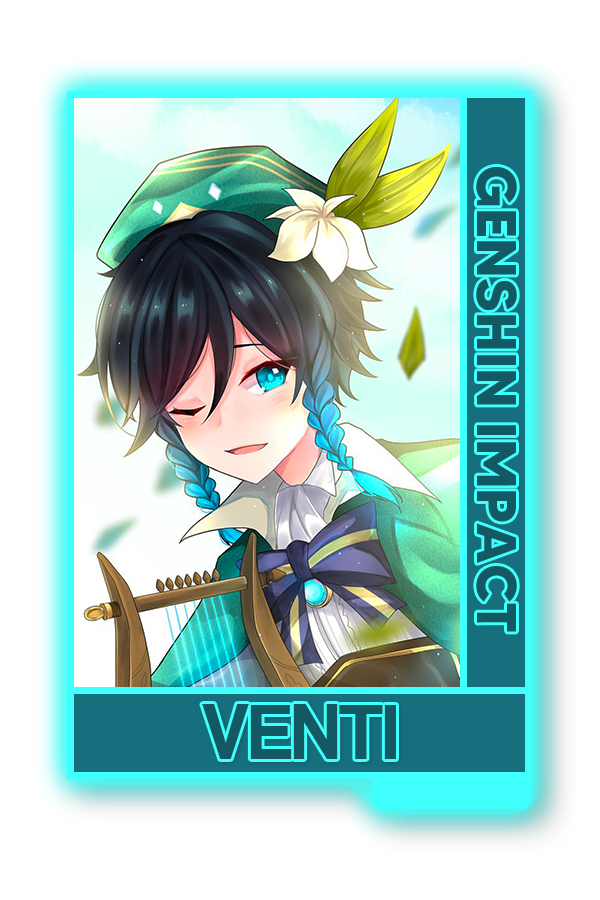
<style>
.page{position:relative;width:600px;height:900px;background:#ffffff}
.page>*{position:absolute;margin:0}
.t1{font:55.8px "MADETOMMY-Bold";color:#245863}
.t2{font:79.8px "CoolveticaRg-Regular";color:#245863}
</style>
<div class="page">
<p class="t1" style="left:476px;top:167px;width:41px;height:465px;rotate:90deg">GENSHIN IMPACT</p>
<p class="t2" style="left:202px;top:704px;width:194px;height:55px">VENTI</p>
</div>
